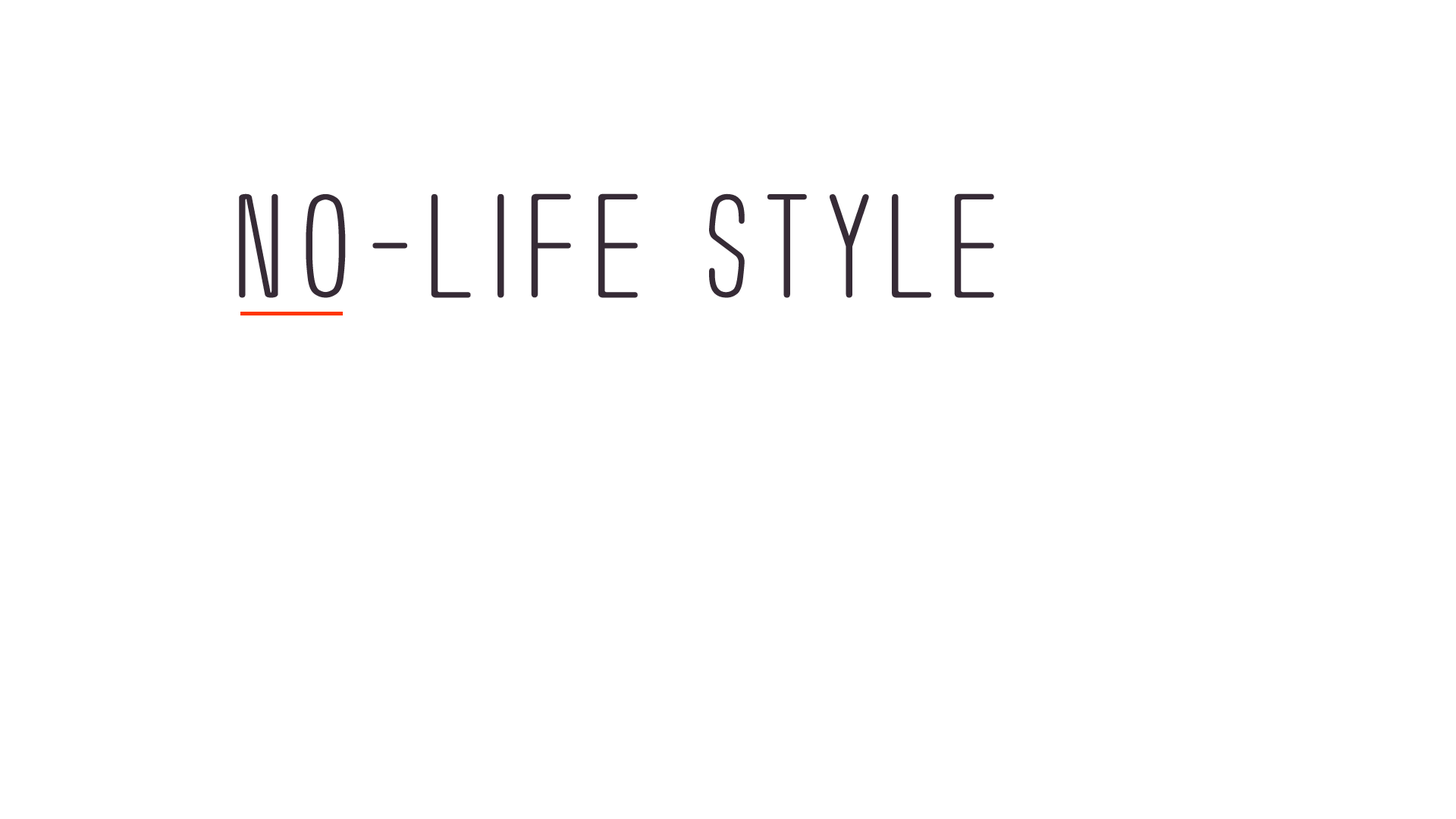
<style>
.page{position:relative;width:1456px;height:819px;background:#ffffff}
.page>*{position:absolute;margin:0}
.t1{font:131px "Usuazi-Hosomozi";letter-spacing:0.05em;color:#362b36;scale:1.1 1}
.t2{font:131px "Usuazi-Hosomozi";letter-spacing:0.075em;color:#362b36;scale:1.1 1}
.t3{font:131px "Usuazi-Hosomozi";letter-spacing:0.05em;color:#362b36}
</style>
<div class="page">
<p class="t1" style="left:239px;top:193px;width:755px;height:105px"><span class="t2">NO</span>-<span class="t2">LIF</span>E <span class="t3">S</span>TYLE</p>
</div>
